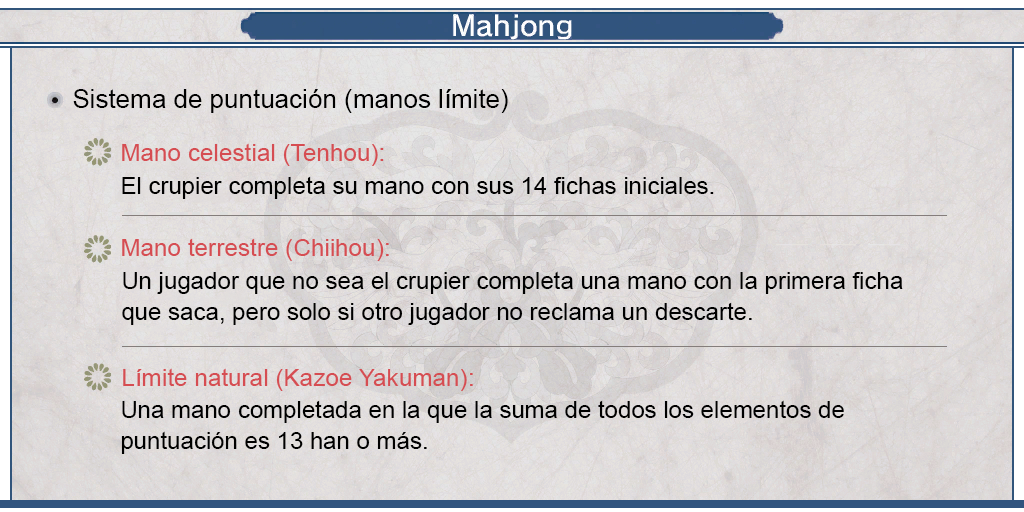
<style>
.page{position:relative;width:1024px;height:512px}
.page>*{position:absolute;margin:0}
.t1{font:26px "ArialMT";color:#000000}
.t2{font:24px "ArialMT";color:#d64d52}
.t3{font:24px "ArialMT";color:#000000}
.t4{font:24px/31px "ArialMT";color:#000000}
</style>
<div class="page">
<p class="t1" style="left:73px;top:89px;width:435px;height:24px">Sistema de puntuación (manos límite)</p>
<p class="t2" style="left:122px;top:143px;width:262px;height:23px">Mano celestial (Tenhou):</p>
<p class="t3" style="left:122px;top:176px;width:592px;height:23px">El crupier completa su mano con sus 14 fichas iniciales.</p>
<p class="t2" style="left:122px;top:238px;width:267px;height:23px">Mano terrestre (Chiihou):</p>
<p class="t4" style="left:122px;top:271px;width:781px;height:54px;text-align:justify">Un jugador que no sea el crupier completa una mano con la primera ficha <br>que saca, pero solo si otro jugador no reclama un descarte.</p>
<p class="t2" style="left:123px;top:368px;width:350px;height:23px">Límite natural (Kazoe Yakuman):</p>
<p class="t4" style="left:121px;top:400px;width:723px;height:54px;text-align:justify">Una mano completada en la que la suma de todos los elementos de <br>puntuación es 13 han o más.</p>
</div>
